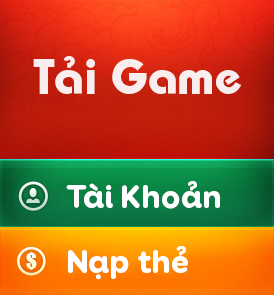
<style>
.page{position:relative;width:274px;height:295px}
.page>*{position:absolute;margin:0}
.t1{font:48px "VNIBamas-Bold";color:#ffffff}
.t2{font:33px "VLBoosterNextFY-Black";color:#ffffff}
</style>
<div class="page">
<p class="t1" style="left:33px;top:56px;width:208px;height:38px;opacity:0.89">Taûi Game</p>
<p class="t2" style="left:66px;top:181px;width:154px;height:28px">Tài Khoản</p>
<p class="t2" style="left:68px;top:246px;width:120px;height:34px">Nạp thẻ</p>
</div>
